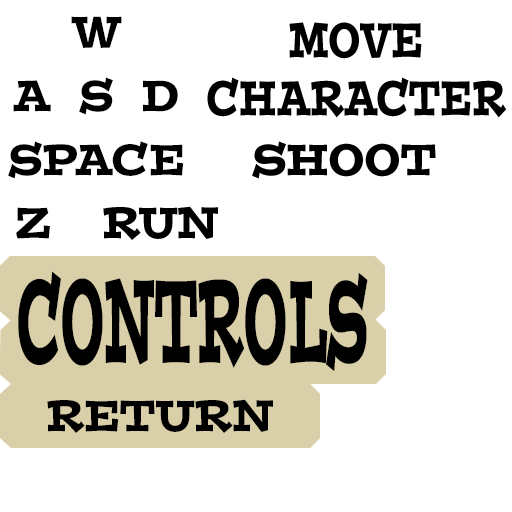
<style>
.page{position:relative;width:512px;height:512px;background:#ffffff}
.page>*{position:absolute;margin:0}
.t1{font:43.6px "PostinoStd";color:#000000;scale:0.83 1}
.t2{font:48.3px "PostinoStd";color:#000000;scale:0.67 1}
.t3{font:116.2px "PostinoStd";color:#000000;scale:0.38 1}
</style>
<div class="page">
<p class="t1" style="left:71px;top:16px;width:51px;height:32px">W</p>
<p class="t2" style="left:207px;top:22px;width:300px;height:96px;text-align:center">MOVE<br>CHARACTER</p>
<p class="t1" style="left:79px;top:77px;width:34px;height:38px">S</p>
<p class="t1" style="left:13px;top:80px;width:38px;height:32px">A</p>
<p class="t1" style="left:143px;top:80px;width:35px;height:32px">D</p>
<p class="t1" style="left:8px;top:141px;width:176px;height:38px">SPACE</p>
<p class="t1" style="left:252px;top:141px;width:184px;height:38px">SHOOT</p>
<p class="t1" style="left:16px;top:207px;width:34px;height:32px">Z</p>
<p class="t1" style="left:103px;top:206px;width:115px;height:34px">RUN</p>
<p class="t3" style="left:18px;top:271px;width:350px;height:100px">CONTROLS</p>
<p class="t1" style="left:47px;top:399px;width:226px;height:34px">RETURN</p>
</div>
